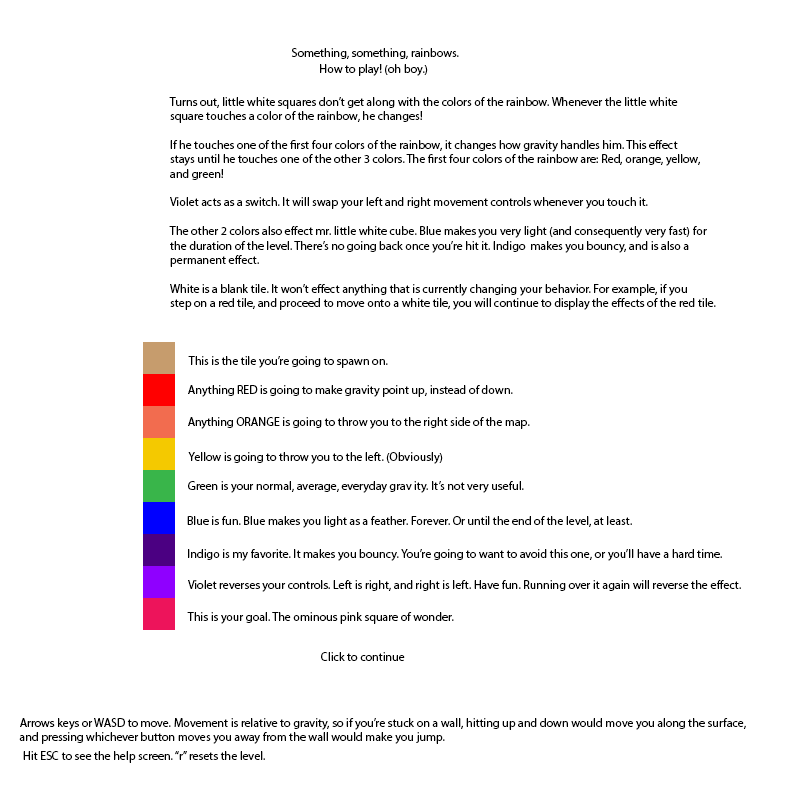
<style>
.page{position:relative;width:800px;height:800px;background:#ffffff}
.page>*{position:absolute;margin:0}
.t1{font:12px "MyriadPro-Regular";color:#000000}
</style>
<div class="page">
<p class="t1" style="left:291px;top:48px;width:168px;height:11px">Something, something, rainbows.</p>
<p class="t1" style="left:320px;top:64px;width:108px;height:12px">How to play! (oh boy.)</p>
<p class="t1" style="left:169px;top:97px;width:547px;height:213px">Turns out, little white squares don’t get along with the colors of the rainbow. Whenever the little white<br>square touches a color of the rainbow, he changes!<br><br>If he touches one of the first four colors of the rainbow, it changes how gravity handles him. This effect <br>stays until he touches one of the other 3 colors. The first four colors of the rainbow are: Red, orange, yellow,<br>and green!<br><br>Violet acts as a switch. It will swap your left and right movement controls whenever you touch it.<br><br>The other 2 colors also effect mr. little white cube. Blue makes you very light (and consequently very fast) for<br>the duration of the level. There’s no going back once you’re hit it. Indigo  makes you bouncy, and is also a <br>permanent effect.<br><br>White is a blank tile. It won’t effect anything that is currently changing your behavior. For example, if you <br>step on a red tile, and proceed to move onto a white tile, you will continue to display the effects of the red tile.</p>
<p class="t1" style="left:188px;top:356px;width:200px;height:12px">This is the tile you’re going to spawn on.</p>
<p class="t1" style="left:188px;top:385px;width:325px;height:12px">Anything RED is going to make gravity point up, instead of down.</p>
<p class="t1" style="left:188px;top:417px;width:342px;height:12px">Anything ORANGE is going to throw you to the right side of the map.</p>
<p class="t1" style="left:188px;top:452px;width:255px;height:12px">Yellow is going to throw you to the left. (Obviously)</p>
<p class="t1" style="left:188px;top:481px;width:336px;height:12px">Green is your normal, average, everyday grav ity. It’s not very useful.</p>
<p class="t1" style="left:187px;top:516px;width:445px;height:12px">Blue is fun. Blue makes you light as a feather. Forever. Or until the end of the level, at least.</p>
<p class="t1" style="left:188px;top:549px;width:534px;height:12px">Indigo is my favorite. It makes you bouncy. You’re going to want to avoid this one, or you’ll have a hard time.</p>
<p class="t1" style="left:188px;top:580px;width:553px;height:12px">Violet reverses your controls. Left is right, and right is left. Have fun. Running over it again will reverse the effect.</p>
<p class="t1" style="left:187px;top:612px;width:267px;height:12px">This is your goal. The ominous pink square of wonder.</p>
<p class="t1" style="left:321px;top:652px;width:84px;height:9px">Click to continue</p>
<p class="t1" style="left:19px;top:718px;width:727px;height:26px">Arrows keys or WASD to move. Movement is relative to gravity, so if you’re stuck on a wall, hitting up and down would move you along the surface, <br>and pressing whichever button moves you away from the wall would make you jump.</p>
<p class="t1" style="left:23px;top:751px;width:242px;height:12px">Hit ESC to see the help screen. “r” resets the level.</p>
</div>
